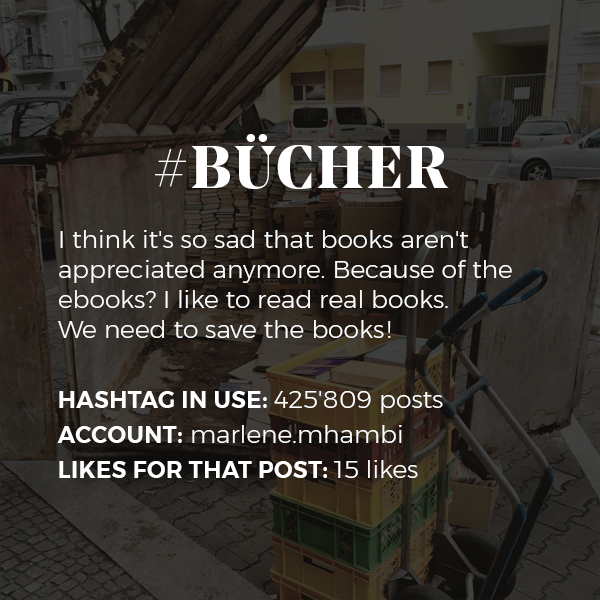
<style>
.page{position:relative;width:600px;height:600px}
.page>*{position:absolute;margin:0}
.t1{font:25px "Montserrat-Light";color:#ffffff}
.t2{font:60px "NoeDisplay-Bold";letter-spacing:0.05em;color:#ffffff;text-transform:uppercase}
.t3{font:23px/35px "Montserrat-SemiBold";letter-spacing:0.02em;color:#ffffff;text-transform:uppercase}
.t4{font:25px/35px "Montserrat-Light";color:#ffffff}
</style>
<div class="page">
<p class="t1" style="left:57px;top:134px;width:455px;height:344px;text-align:center"><span class="t2">#bücher<br></span><br>I think it's so sad that books aren't appreciated anymore. Because of the ebooks? I like to read real books. <br>We need to save the books!<br><br><span class="t3">Hashtag in use: </span><span class="t4">425'809 posts<br></span><span class="t3">Account:</span><span class="t4"> marlene.mhambi<br></span><span class="t3">likes for that post: </span><span class="t4">15 likes</span></p>
</div>
